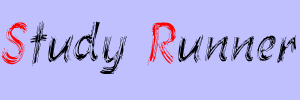
<style>
.page{position:relative;width:300px;height:100px;background:#c0c0ff}
.page>*{position:absolute;margin:0}
.t1{font:52px "Mgonsm";color:#000000;font-style:italic;scale:0.8 1}
.t2{font:52px "Mgonsm";color:#ff0000;font-style:italic;scale:0.8 1}
</style>
<div class="page">
<p class="t1" style="left:1px;top:21px;width:295px;height:53px"><span class="t2">S</span>tudy <span class="t2">R</span>unner</p>
</div>
